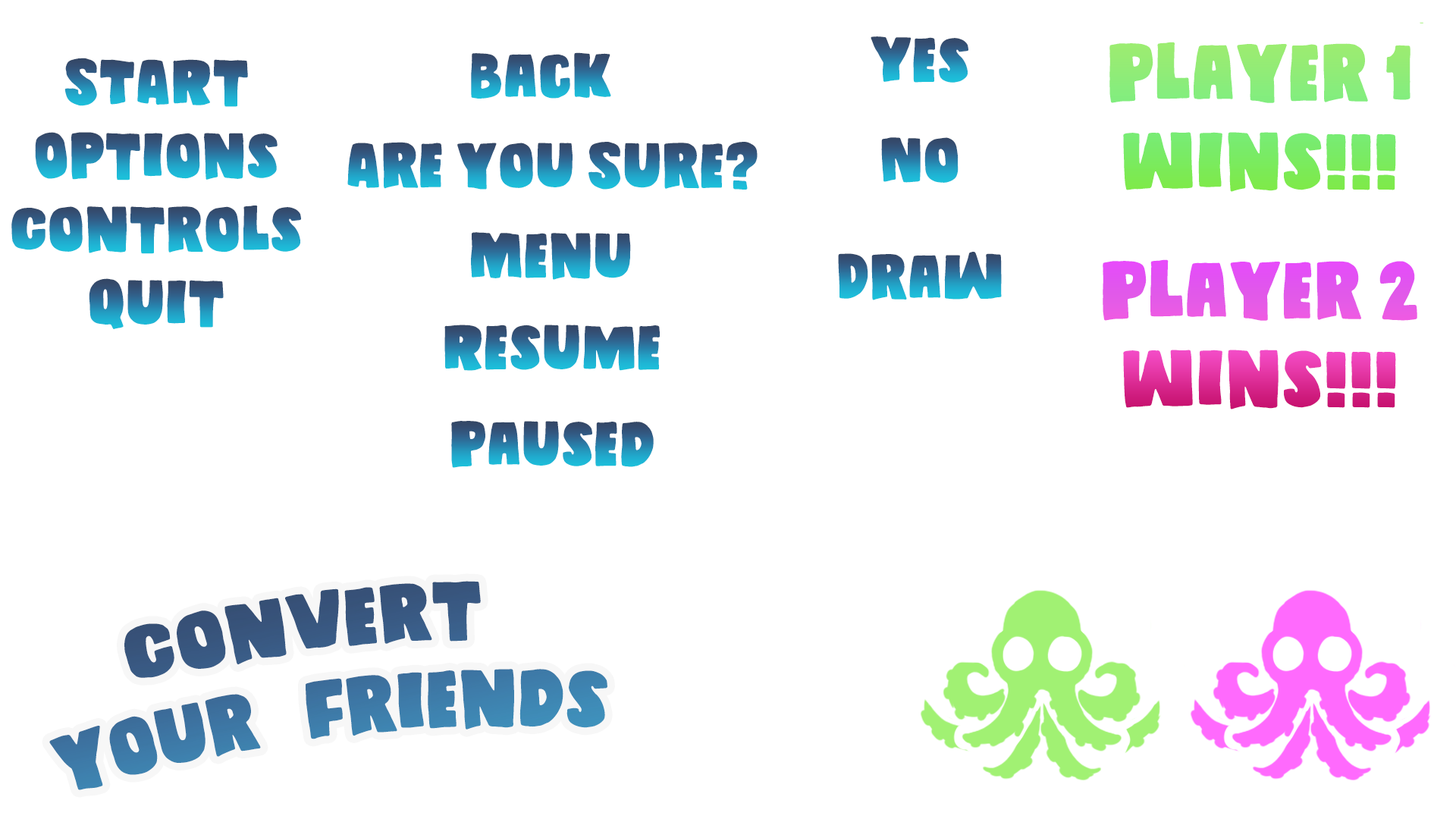
<style>
.page{position:relative;width:1456px;height:819px;background:#ffffff}
.page>*{position:absolute;margin:0}
.t1{font:73.8px "DaddyinspaceDEMO"}
.t2{font:58px "DaddyinspaceDEMO"}
</style>
<div class="page">
<p class="t1" style="left:1109px;top:22px;width:314px;height:170px;text-align:center">Player 1<br>Wins!!!</p>
<p class="t2" style="left:871px;top:36px;width:97px;height:47px">Yes</p>
<p class="t2" style="left:471px;top:52px;width:140px;height:47px">Back</p>
<p class="t2" style="left:64px;top:58px;width:184px;height:49px">STARt</p>
<p class="t2" style="left:35px;top:132px;width:243px;height:48px">Options</p>
<p class="t2" style="left:881px;top:137px;width:78px;height:46px">No</p>
<p class="t2" style="left:347px;top:142px;width:411px;height:48px">Are you Sure?</p>
<p class="t2" style="left:11px;top:206px;width:290px;height:48px">Controls</p>
<p class="t2" style="left:471px;top:232px;width:160px;height:48px">Menu</p>
<p class="t2" style="left:838px;top:252px;width:164px;height:48px">Draw</p>
<p class="t1" style="left:1103px;top:259px;width:314px;height:150px;text-align:center">Player 2<br>Wins!!!</p>
<p class="t2" style="left:89px;top:278px;width:135px;height:51px">quit</p>
<p class="t2" style="left:444px;top:325px;width:216px;height:46px">Resume</p>
<p class="t2" style="left:451px;top:421px;width:203px;height:47px">Paused</p>
<p class="t1" style="left:49px;top:581px;width:558px;height:209px;text-align:center;rotate:-8deg">Convert<br>  your   friends</p>
</div>
